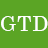
<style>
.page{position:relative;width:48px;height:48px;background:#5ba525}
.page>*{position:absolute;margin:0}
.t1{font:20.8px "CenturySchoolbook";letter-spacing:0.05em;color:#ffffff}
</style>
<div class="page">
<p class="t1" style="left:1px;top:16px;width:47px;height:15px">GTD</p>
</div>
